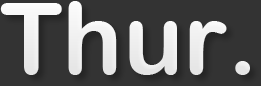
<style>
.page{position:relative;width:261px;height:86px;background:#333333}
.page>*{position:absolute;margin:0}
.t1{font:100px "ArialRoundedMTBold";color:#ffffff}
</style>
<div class="page">
<p class="t1" style="left:0px;top:1px;width:250px;height:74px">Thur.</p>
</div>
